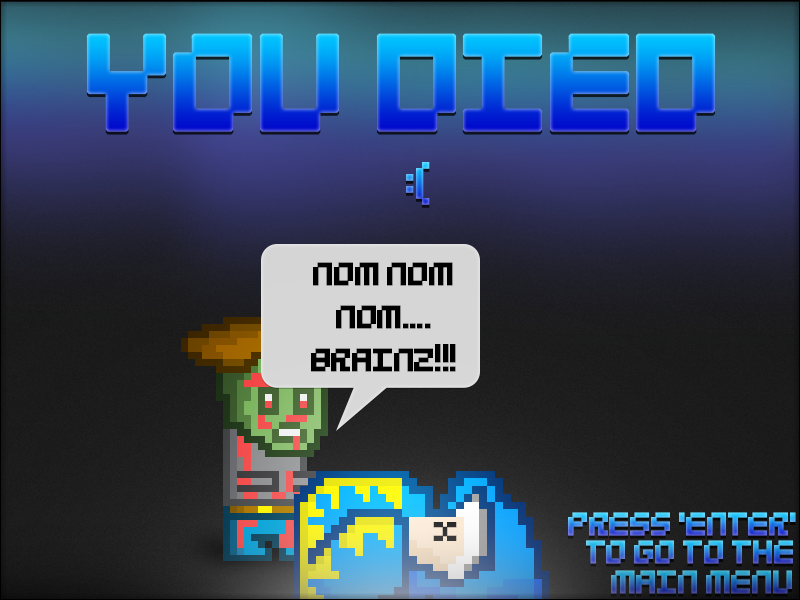
<style>
.page{position:relative;width:800px;height:600px}
.page>*{position:absolute;margin:0}
.t1{font:150px "5Mikropix";letter-spacing:-0.075em;font-weight:bold}
.t2{font:48px "5Mikropix";letter-spacing:-0.075em;font-weight:bold}
.t3{font:36px "5Mikropix";letter-spacing:-0.075em;color:#000000;font-weight:bold}
.t4{font:36px "5Mikropix";letter-spacing:-0.075em;font-weight:bold}
</style>
<div class="page">
<p class="t1" style="left:86px;top:33px;width:630px;height:99px">YOU DIED</p>
<p class="t2" style="left:406px;top:162px;width:24px;height:43px">:(</p>
<p class="t3" style="left:311px;top:262px;width:145px;height:110px;text-align:center">NOM NOM NOM....<br>BRAINZ!!!</p>
<p class="t4" style="left:568px;top:512px;width:228px;height:24px">PRESS ‘ENTER’</p>
<p class="t4" style="left:586px;top:540px;width:207px;height:24px">TO GO TO THE</p>
<p class="t4" style="left:611px;top:570px;width:181px;height:24px">MAIN MENU</p>
</div>
